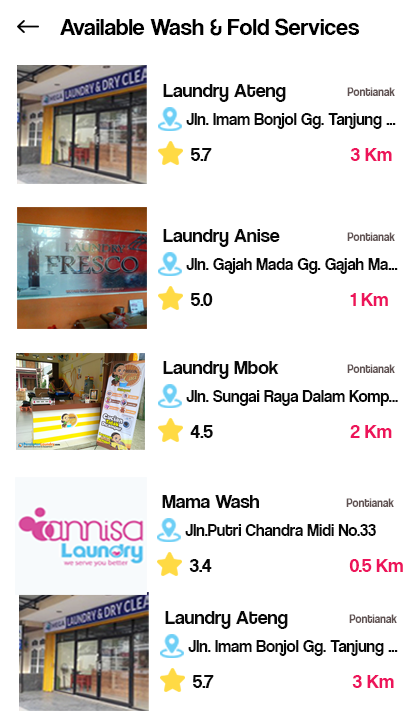
<style>
.page{position:relative;width:420px;height:720px;background:#ffffff}
.page>*{position:absolute;margin:0}
.t1{font:24px "CoolveticaRg-Regular";color:#000000}
.t2{font:20px "CoolveticaRg-Regular";color:#090909}
.t3{font:12px "CoolveticaRg-Regular";color:#605252;scale:0.96 1}
.t4{font:17px "CoolveticaRg-Regular";color:#090909}
.t5{font:20px "CoolveticaRg-Regular";color:#ed145b}
</style>
<div class="page">
<p class="t1" style="left:60px;top:18px;width:300px;height:18px">Available Wash &amp; Fold Services</p>
<p class="t2" style="left:163px;top:84px;width:123px;height:18px">Laundry Ateng</p>
<p class="t3" style="left:347px;top:87px;width:48px;height:9px">Pontianak</p>
<p class="t4" style="left:186px;top:113px;width:210px;height:16px">Jln. Imam Bonjol Gg. Tanjung ...</p>
<p class="t2" style="left:191px;top:148px;width:21px;height:13px">5.7</p>
<p class="t5" style="left:350px;top:148px;width:42px;height:13px">3 Km</p>
<p class="t2" style="left:163px;top:229px;width:117px;height:18px">Laundry Anise</p>
<p class="t3" style="left:347px;top:232px;width:48px;height:9px">Pontianak</p>
<p class="t4" style="left:186px;top:258px;width:212px;height:16px">Jln. Gajah Mada Gg. Gajah Ma...</p>
<p class="t2" style="left:191px;top:293px;width:22px;height:13px">5.0</p>
<p class="t5" style="left:350px;top:293px;width:38px;height:13px">1 Km</p>
<p class="t2" style="left:163px;top:361px;width:116px;height:18px">Laundry Mbok</p>
<p class="t3" style="left:347px;top:364px;width:48px;height:9px">Pontianak</p>
<p class="t4" style="left:186px;top:390px;width:212px;height:16px">Jln. Sungai Raya Dalam Komp...</p>
<p class="t2" style="left:190px;top:425px;width:23px;height:13px">4.5</p>
<p class="t5" style="left:350px;top:425px;width:42px;height:13px">2 Km</p>
<p class="t2" style="left:162px;top:495px;width:97px;height:13px">Mama Wash</p>
<p class="t3" style="left:346px;top:498px;width:48px;height:9px">Pontianak</p>
<p class="t4" style="left:185px;top:524px;width:191px;height:12px">Jln.Putri Chandra Midi No.33</p>
<p class="t2" style="left:189px;top:559px;width:23px;height:13px">3.4</p>
<p class="t5" style="left:349px;top:559px;width:54px;height:13px">0.5 Km</p>
<p class="t2" style="left:165px;top:611px;width:123px;height:18px">Laundry Ateng</p>
<p class="t3" style="left:349px;top:614px;width:48px;height:9px">Pontianak</p>
<p class="t4" style="left:188px;top:640px;width:210px;height:16px">Jln. Imam Bonjol Gg. Tanjung ...</p>
<p class="t2" style="left:193px;top:675px;width:21px;height:13px">5.7</p>
<p class="t5" style="left:352px;top:675px;width:42px;height:13px">3 Km</p>
</div>
